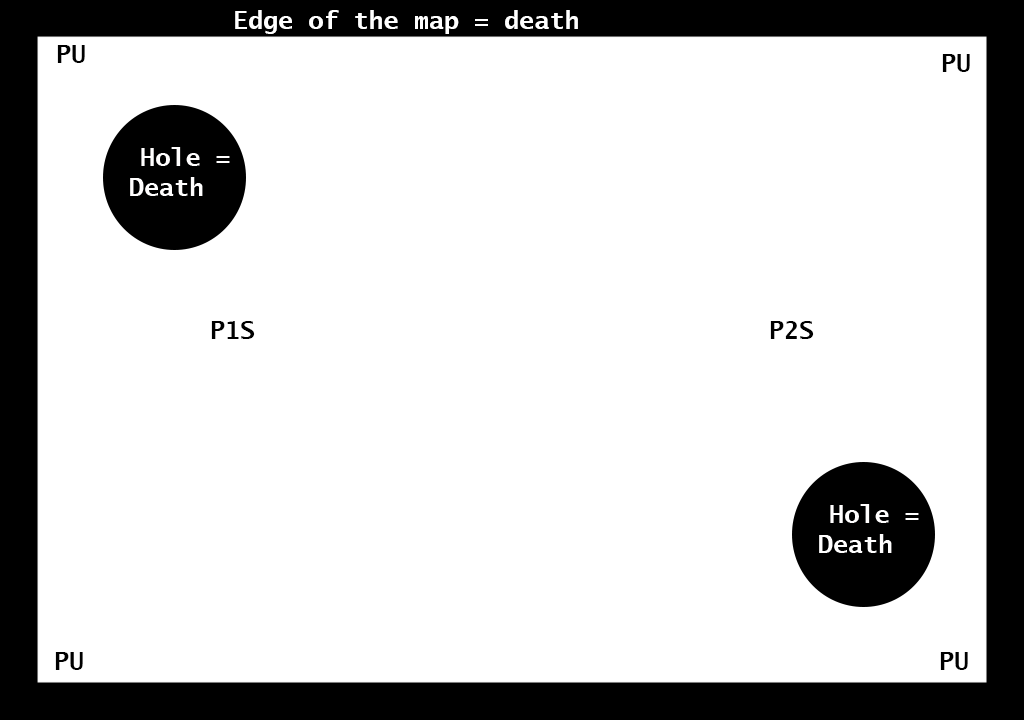
<style>
.page{position:relative;width:1024px;height:720px;background:#ffffff}
.page>*{position:absolute;margin:0}
.t1{font:25px "LucidaSans-TypewriterBold";color:#ffffff}
.t2{font:25px "LucidaSans-TypewriterBold";color:#000000}
</style>
<div class="page">
<p class="t1" style="left:235px;top:10px;width:343px;height:24px">Edge of the map = death</p>
<p class="t2" style="left:57px;top:45px;width:28px;height:18px">PU</p>
<p class="t2" style="left:942px;top:54px;width:28px;height:18px">PU</p>
<p class="t2" style="left:211px;top:321px;width:44px;height:18px">P1S</p>
<p class="t2" style="left:770px;top:321px;width:44px;height:18px">P2S</p>
<p class="t2" style="left:55px;top:652px;width:28px;height:18px">PU</p>
<p class="t2" style="left:940px;top:652px;width:28px;height:18px">PU</p>
</div>
